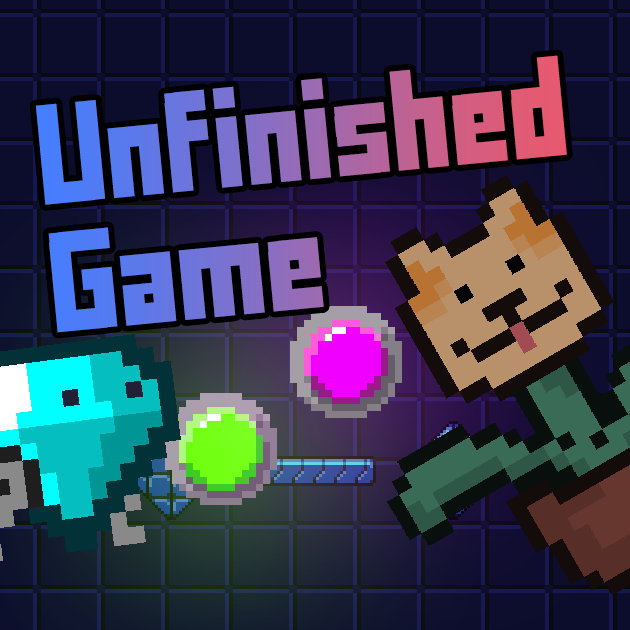
<style>
.page{position:relative;width:630px;height:630px}
.page>*{position:absolute;margin:0}
.t1{font:78.9px/128.2px "FFFForward"}
</style>
<div class="page">
<p class="t1" style="left:35px;top:55px;width:532px;height:278px;rotate:-5deg">Unfinished <br>Game</p>
</div>
